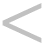
<style>
.page{position:relative;width:46px;height:46px;background:#ffffff}
.page>*{position:absolute;margin:0}
.t1{font:96px "Roboto-Light";color:#c1c1c1}
</style>
<div class="page">
<p class="t1" style="left:2px;top:3px;width:40px;height:40px">&lt;</p>
</div>
